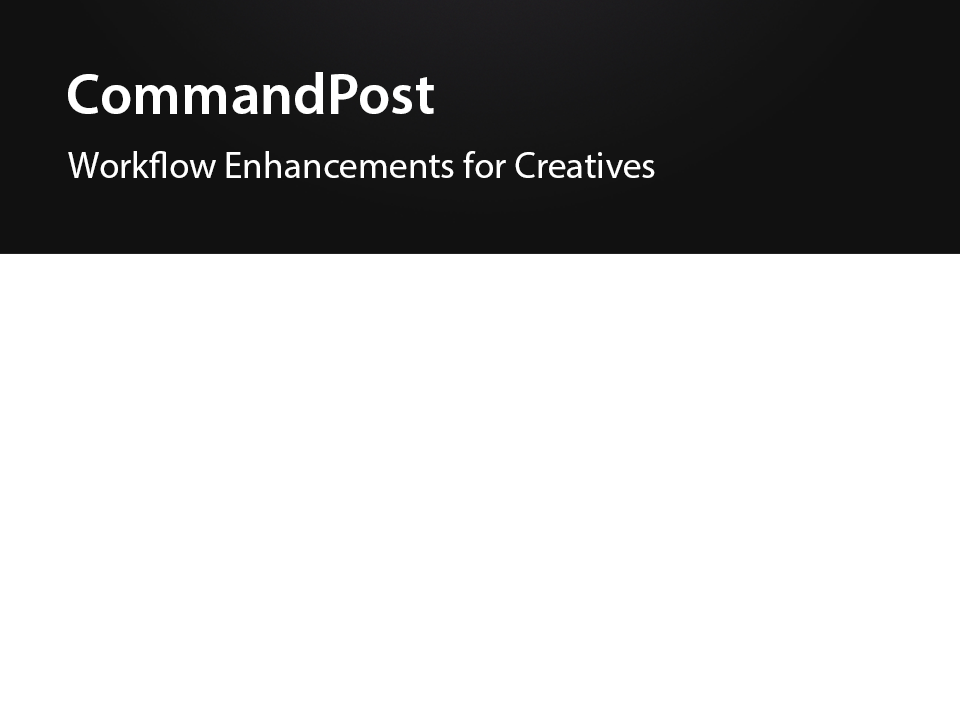
<style>
.page{position:relative;width:960px;height:709px;background:#ffffff}
.page>*{position:absolute;margin:0}
.t1{font:57.9px "MyriadPro-Semibold";color:#ffffff}
.t2{font:37.3px "MyriadPro-Regular";color:#ffffff}
</style>
<div class="page">
<p class="t1" style="left:68px;top:72px;width:366px;height:42px">CommandPost</p>
<p class="t2" style="left:68px;top:151px;width:587px;height:27px">Workflow Enhancements for Creatives</p>
</div>
